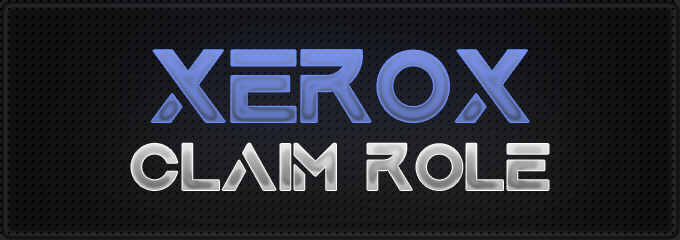
<style>
.page{position:relative;width:680px;height:240px}
.page>*{position:absolute;margin:0}
.t1{font:108.6px "AquireBold";letter-spacing:-0.04em}
.t2{font:69.7px "AquireBold";letter-spacing:-0.04em}
</style>
<div class="page">
<p class="t1" style="left:151px;top:50px;width:378px;height:72px">XEROX</p>
<p class="t2" style="left:131px;top:143px;width:418px;height:47px">CLAIM ROLE</p>
</div>
